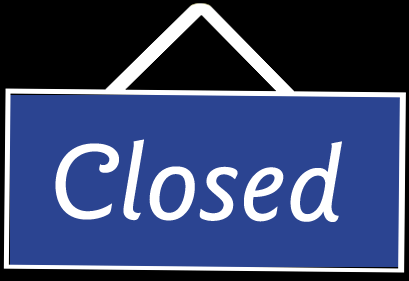
<style>
.page{position:relative;width:409px;height:281px;background:#2b4491}
.page>*{position:absolute;margin:0}
.t1{font:111.4px "GoudySans-MediumItalic";letter-spacing:0.01em;color:#ffffff}
</style>
<div class="page">
<p class="t1" style="left:55px;top:139px;width:287px;height:83px;rotate:1deg">Closed</p>
</div>
